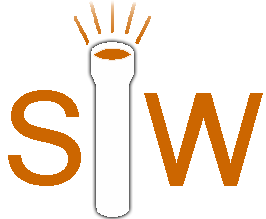
<style>
.page{position:relative;width:266px;height:219px;background:#ffffff}
.page>*{position:absolute;margin:0}
.t1{font:125px "Mangal";color:#cc6600}
</style>
<div class="page">
<p class="t1" style="left:8px;top:90px;width:73px;height:96px">S</p>
<p class="t1" style="left:144px;top:93px;width:119px;height:93px">W</p>
</div>
